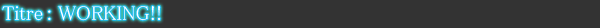
<style>
.page{position:relative;width:600px;height:28px;background:#333333}
.page>*{position:absolute;margin:0}
.t1{font:20px "MS-PMincho";color:#ffffff}
</style>
<div class="page">
<p class="t1" style="left:2px;top:5px;width:159px;height:16px">Titre : WORKING!!</p>
</div>
